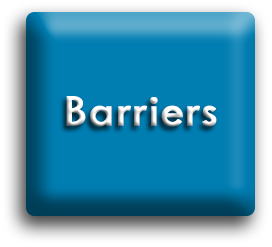
<style>
.page{position:relative;width:272px;height:247px;background:#007db1}
.page>*{position:absolute;margin:0}
.t1{font:46.8px "TwCenMT-Regular";font-weight:bold}
</style>
<div class="page">
<p class="t1" style="left:66px;top:96px;width:151px;height:31px">Barriers</p>
</div>
